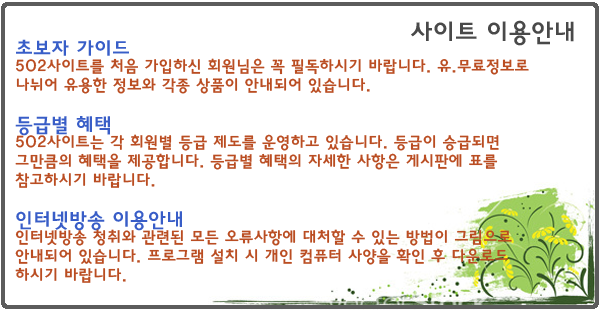
<style>
.page{position:relative;width:600px;height:310px;background:#ffffff}
.page>*{position:absolute;margin:0}
.t1{font:25px "HaanYGodic24";color:#494949}
.t2{font:16px/19px "HaanYGodic24";color:#ba4d22}
.t3{font:20px/19px "HaanYGodic24";color:#385ec8}
.t4{font:20px/19px "HaanYGodic24";color:#385dc7}
</style>
<div class="page">
<p class="t1" style="left:411px;top:20px;width:163px;height:26px">사이트 이용안내</p>
<p class="t2" style="left:15px;top:39px;width:514px;height:244px"><span class="t3">초보자 가이드 <br></span>502사이트를 처음 가입하신 회원님은 꼭 필독하시기 바랍니다. 유.무료정보로 나뉘어 유용한 정보와 각종 상품이 안내되어 있습니다.<br><br><span class="t4">등급별 혜택<br></span>502사이트는 각 회원별 등급 제도를 운영하고 있습니다. 등급이 승급되면 그만큼의 혜택을 제공합니다. 등급별 혜택의 자세한 사항은 게시판에 표를 참고하시기 바랍니다.<br><br><span class="t4">인터넷방송 이용안내<br></span>인터넷방송 청취와 관련된 모든 오류사항에 대처할 수 있는 방법이 그림으로 안내되어 있습니다. 프로그램 설치 시 개인 컴퓨터 사양을 확인 후 다운로드 하시기 바랍니다.</p>
</div>
